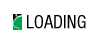
<style>
.page{position:relative;width:99px;height:44px;background:#ffffff}
.page>*{position:absolute;margin:0}
.t1{font:18px "HelveticaNeue-Condensed";color:#000000}
</style>
<div class="page">
<p class="t1" style="left:27px;top:15px;width:59px;height:14px">LOADING</p>
</div>
